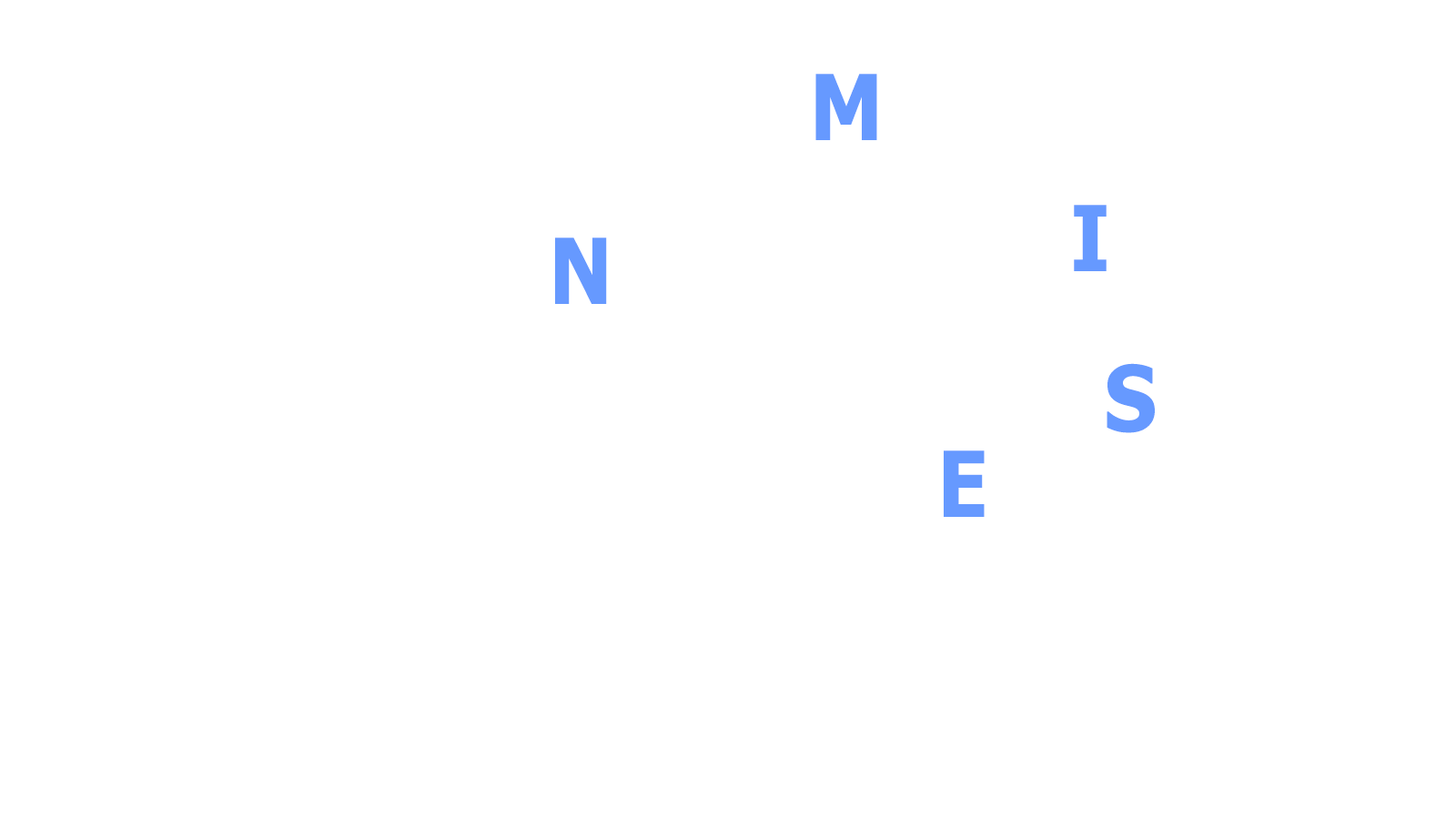
<style>
.page{position:relative;width:1456px;height:819px;background:#ffffff}
.page>*{position:absolute;margin:0}
.t1{font:91px "Tahoma-Bold";letter-spacing:-0.1em;color:#6699ff;scale:0.9 1}
</style>
<div class="page">
<p class="t1" style="left:815px;top:74px;width:62px;height:66px">M</p>
<p class="t1" style="left:1074px;top:205px;width:33px;height:66px">I</p>
<p class="t1" style="left:555px;top:238px;width:52px;height:66px">N</p>
<p class="t1" style="left:1107px;top:363px;width:48px;height:70px">S</p>
<p class="t1" style="left:944px;top:450px;width:41px;height:67px">E</p>
</div>
